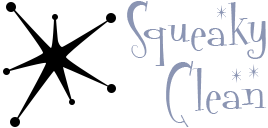
<style>
.page{position:relative;width:268px;height:128px;background:#ffffff}
.page>*{position:absolute;margin:0}
.t1{font:71.7px/343.8px "FontdinerdotcomSparkly";color:#8b95b3}
.t2{font:71.7px/63.2px "FontdinerdotcomSparkly";color:#8b95b3}
</style>
<div class="page">
<p class="t1" style="left:127px;top:1px;width:140px;height:126px">Squeaky<br><span class="t2">   Clean</span></p>
</div>
